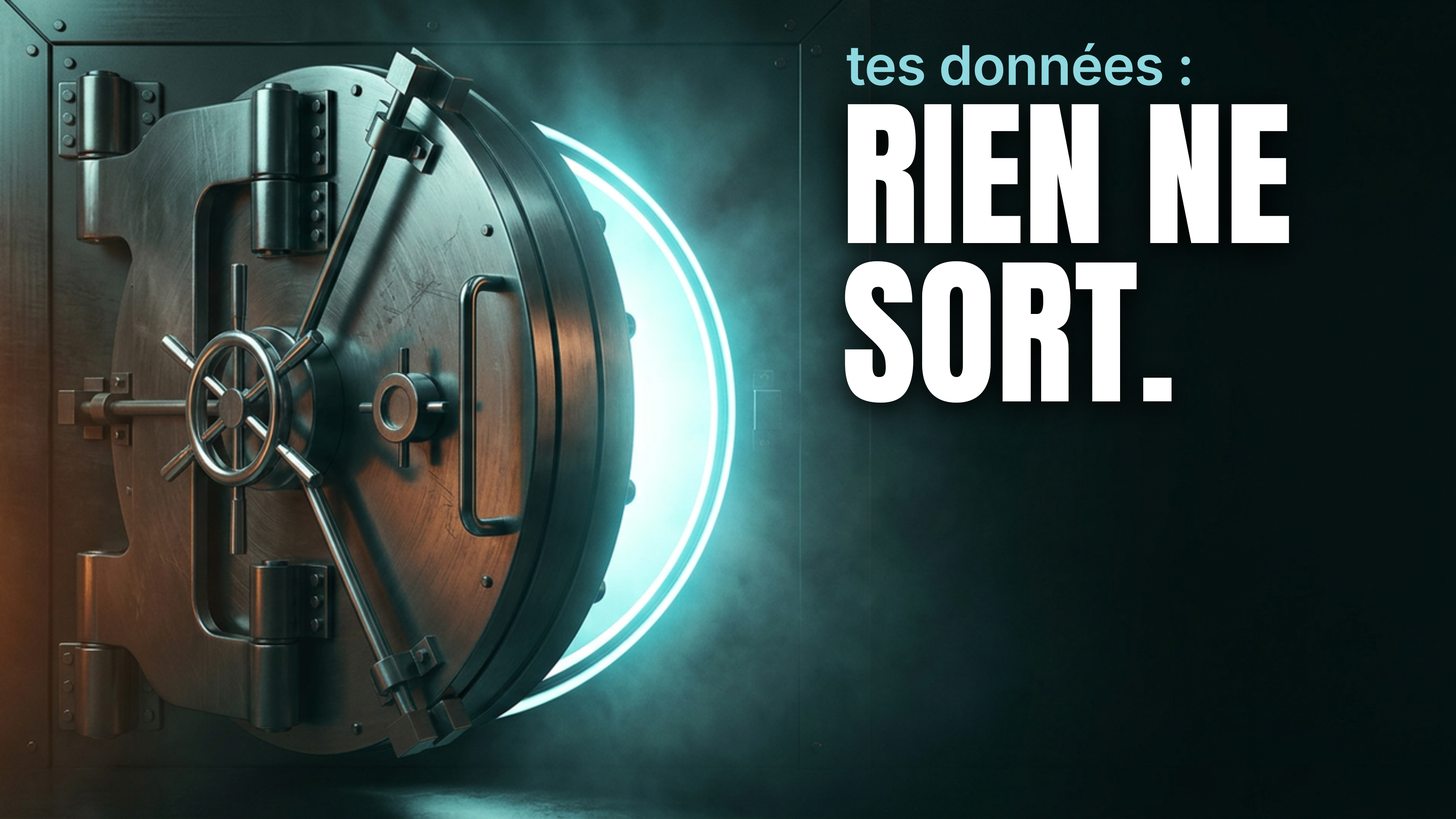
<style>
.page{position:relative;width:1456px;height:819px}
.page>*{position:absolute;margin:0}
.t1{font:54.6px "Inter-ExtraBold";letter-spacing:-0.01em;color:#8fd8e0}
.t2{font:161.5px/158.3px "Anton-Regular";letter-spacing:0.005em;color:#ffffff}
</style>
<div class="page">
<p class="t1" style="left:846px;top:43px;width:345px;height:43px">tes données :</p>
<p class="t2" style="left:844px;top:104px;width:446px;height:299px">RIEN NE<br>SORT.</p>
</div>
